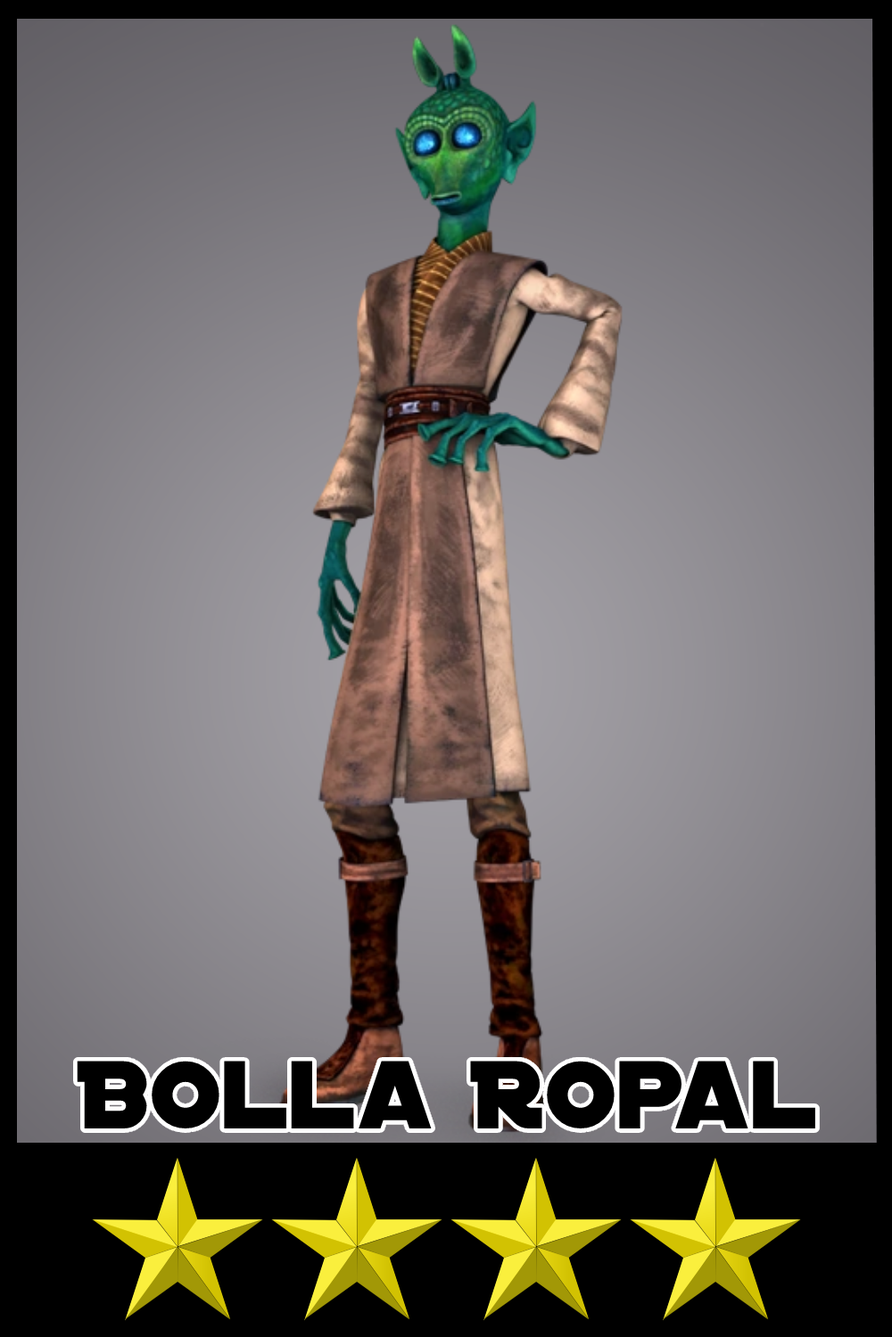
<style>
.page{position:relative;width:892px;height:1337px}
.page>*{position:absolute;margin:0}
.t1{font:103.4px "DistantGalaxy";color:#000000}
</style>
<div class="page">
<p class="t1" style="left:77px;top:1061px;width:738px;height:68px">Bolla Ropal</p>
</div>
